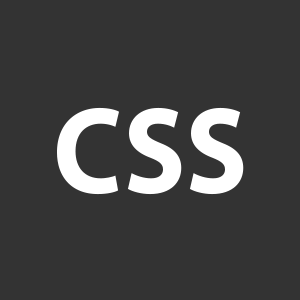
<style>
.page{position:relative;width:300px;height:300px;background:#333333}
.page>*{position:absolute;margin:0}
.t1{font:125px "MyriadPro-Bold";color:#ffffff;scale:0.93 1}
</style>
<div class="page">
<p class="t1" style="left:57px;top:107px;width:187px;height:88px">CSS</p>
</div>
